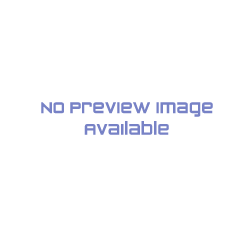
<style>
.page{position:relative;width:250px;height:250px;background:#ffffff}
.page>*{position:absolute;margin:0}
.t1{font:18px "ZeroTwos";color:#7782c6}
</style>
<div class="page">
<p class="t1" style="left:41px;top:102px;width:172px;height:33px;text-align:center">No Preview Image Available</p>
</div>
